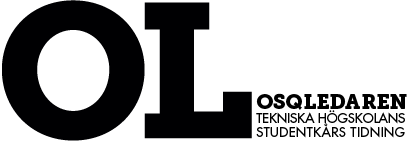
<style>
.page{position:relative;width:410px;height:141px;background:#ffffff}
.page>*{position:absolute;margin:0}
.t1{font:20.7px "MuseoSlab-900";color:#000000}
.t2{font:13.1px/14.3px "Futura";color:#000000;text-transform:uppercase}
.t3{font:13.1px/13.3px "Futura";letter-spacing:0.038em;color:#000000;text-transform:uppercase}
</style>
<div class="page">
<p class="t1" style="left:256px;top:93px;width:151px;height:17px">OSQLEDAREN</p>
<p class="t2" style="left:256px;top:110px;width:149px;height:28px">Tekniska Högskolans <br><span class="t3">Studentkårs tidning</span></p>
</div>
